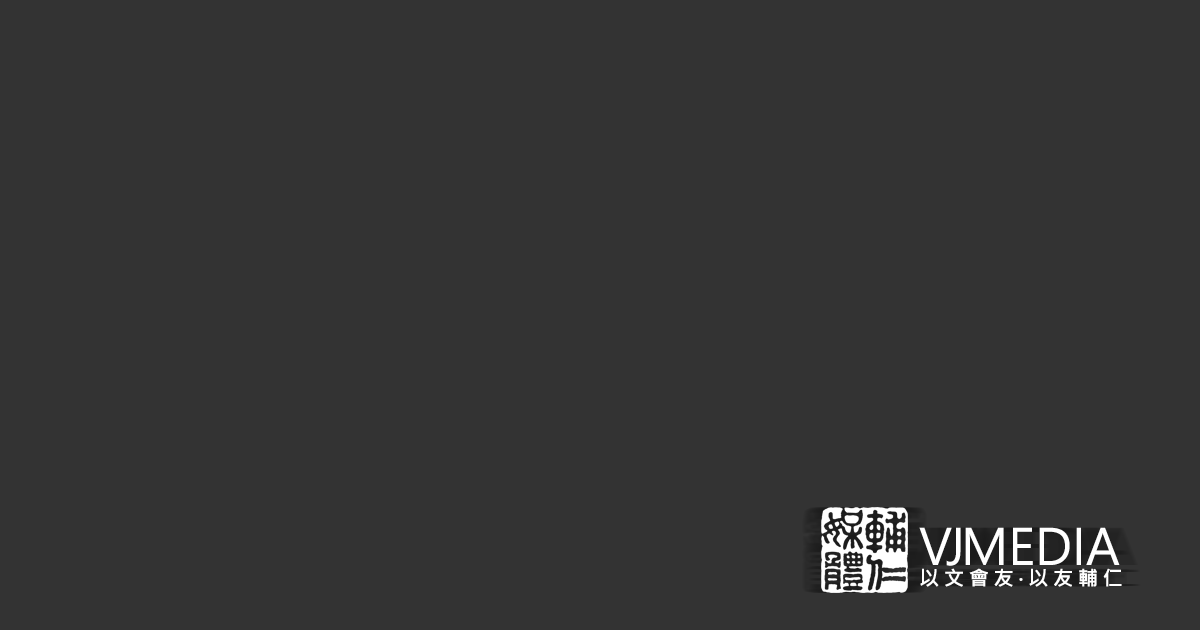
<style>
.page{position:relative;width:1200px;height:630px;background:#333333}
.page>*{position:absolute;margin:0}
.t1{font:20px/46.3px "MicrosoftJhengHeiBold";letter-spacing:0.24em;color:#ffffff}
.t2{font:49px/46.3px "MicrosoftJhengHeiRegular";letter-spacing:-0.08em;color:#ffffff}
.t3{font:49px/46.3px "MicrosoftJhengHeiRegular";color:#ffffff}
</style>
<div class="page">
<p class="t1" style="left:919px;top:527px;width:203px;height:60px"><span class="t2">VJ</span><span class="t3">MEDIA<br></span>以文會友‧以友輔仁</p>
</div>
